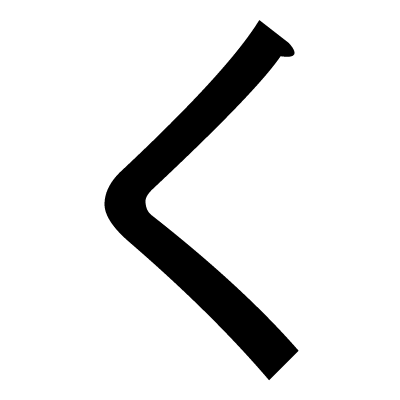
<style>
.page{position:relative;width:400px;height:400px;background:#ffffff}
.page>*{position:absolute;margin:0}
.t1{font:416.7px "MS-PGothic";color:#000000}
</style>
<div class="page">
<p class="t1" style="left:104px;top:20px;width:195px;height:361px">く</p>
</div>
